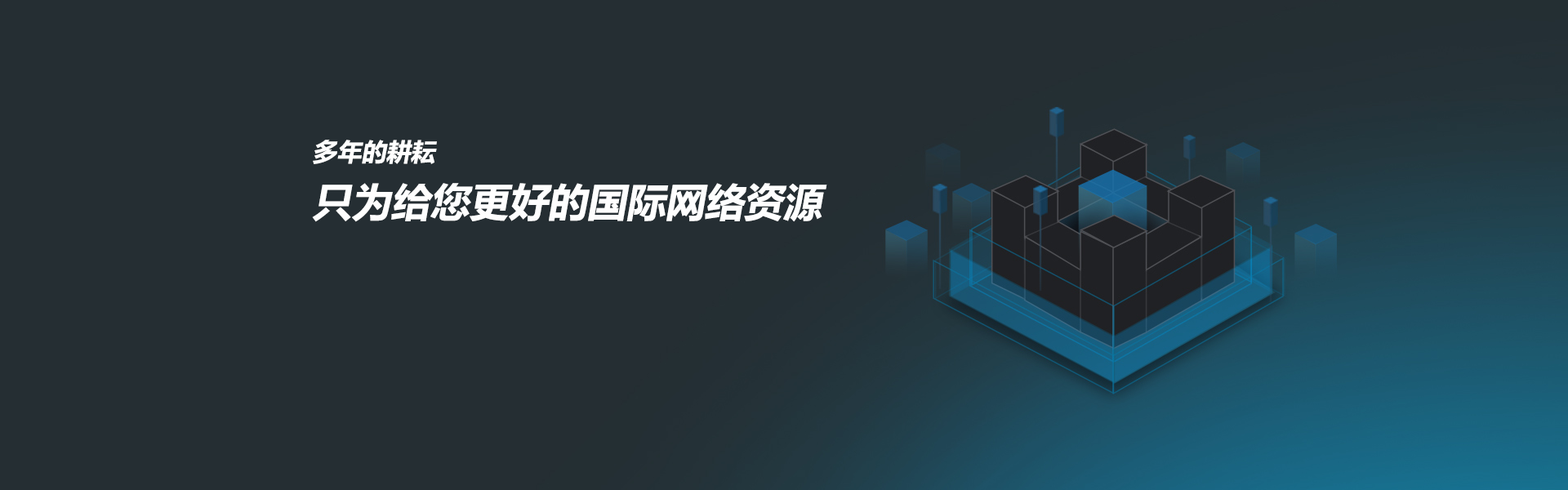
<style>
.page{position:relative;width:1568px;height:490px;background:#252e33}
.page>*{position:absolute;margin:0}
.t1{font:39.2px "MicrosoftYaHei-Bold";color:#fefefe;font-style:italic}
.t2{font:24.5px "MicrosoftYaHei-Bold";color:#fefefe;font-style:italic}
</style>
<div class="page">
<p class="t1" style="left:312px;top:140px;width:515px;height:82px"><span class="t2">多年的耕耘<br></span>只为给您更好的国际网络资源</p>
</div>
